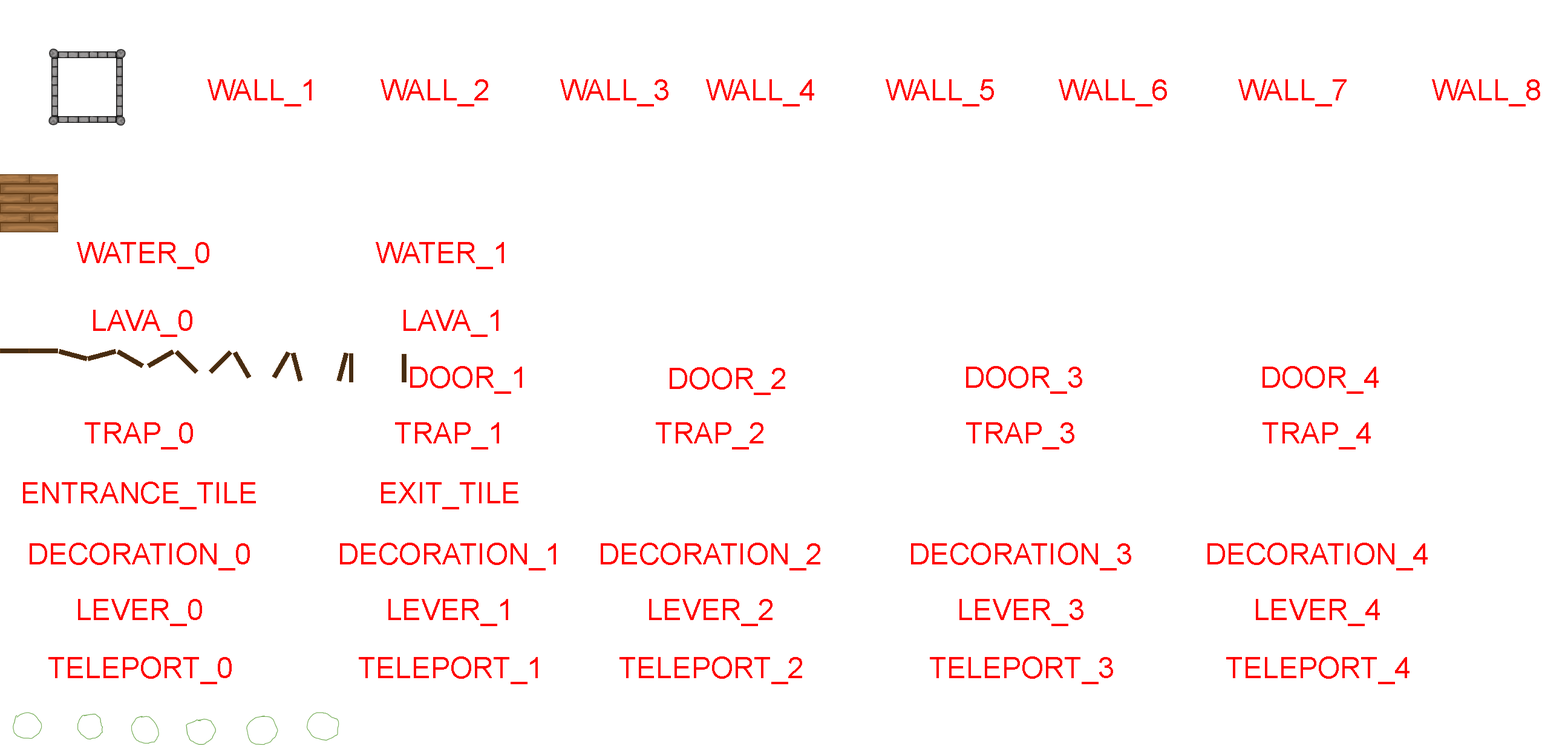
<style>
.page{position:relative;width:1568px;height:755px;background:#ffffff}
.page>*{position:absolute;margin:0}
.t1{font:29px "ArialMT";color:#ff0000}
</style>
<div class="page">
<p class="t1" style="left:207px;top:79px;width:105px;height:27px">WALL_1</p>
<p class="t1" style="left:381px;top:79px;width:107px;height:27px">WALL_2</p>
<p class="t1" style="left:560px;top:79px;width:108px;height:27px">WALL_3</p>
<p class="t1" style="left:706px;top:79px;width:108px;height:27px">WALL_4</p>
<p class="t1" style="left:886px;top:79px;width:108px;height:27px">WALL_5</p>
<p class="t1" style="left:1059px;top:79px;width:108px;height:27px">WALL_6</p>
<p class="t1" style="left:1238px;top:79px;width:109px;height:27px">WALL_7</p>
<p class="t1" style="left:1432px;top:79px;width:108px;height:27px">WALL_8</p>
<p class="t1" style="left:77px;top:242px;width:132px;height:27px">WATER_0</p>
<p class="t1" style="left:376px;top:242px;width:128px;height:27px">WATER_1</p>
<p class="t1" style="left:93px;top:310px;width:99px;height:27px">LAVA_0</p>
<p class="t1" style="left:403px;top:310px;width:95px;height:27px">LAVA_1</p>
<p class="t1" style="left:410px;top:366px;width:112px;height:28px">DOOR_1</p>
<p class="t1" style="left:966px;top:366px;width:116px;height:28px">DOOR_3</p>
<p class="t1" style="left:1263px;top:366px;width:116px;height:28px">DOOR_4</p>
<p class="t1" style="left:670px;top:367px;width:115px;height:28px">DOOR_2</p>
<p class="t1" style="left:85px;top:422px;width:108px;height:27px">TRAP_0</p>
<p class="t1" style="left:395px;top:422px;width:104px;height:27px">TRAP_1</p>
<p class="t1" style="left:656px;top:422px;width:107px;height:27px">TRAP_2</p>
<p class="t1" style="left:966px;top:422px;width:108px;height:27px">TRAP_3</p>
<p class="t1" style="left:1263px;top:422px;width:108px;height:27px">TRAP_4</p>
<p class="t1" style="left:23px;top:482px;width:233px;height:27px">ENTRANCE_TILE</p>
<p class="t1" style="left:381px;top:482px;width:137px;height:27px">EXIT_TILE</p>
<p class="t1" style="left:30px;top:543px;width:220px;height:27px">DECORATION_0</p>
<p class="t1" style="left:340px;top:543px;width:216px;height:27px">DECORATION_1</p>
<p class="t1" style="left:601px;top:543px;width:219px;height:27px">DECORATION_2</p>
<p class="t1" style="left:911px;top:543px;width:220px;height:27px">DECORATION_3</p>
<p class="t1" style="left:1207px;top:543px;width:221px;height:27px">DECORATION_4</p>
<p class="t1" style="left:78px;top:599px;width:124px;height:27px">LEVER_0</p>
<p class="t1" style="left:388px;top:599px;width:120px;height:27px">LEVER_1</p>
<p class="t1" style="left:649px;top:599px;width:124px;height:27px">LEVER_2</p>
<p class="t1" style="left:959px;top:599px;width:124px;height:27px">LEVER_3</p>
<p class="t1" style="left:1256px;top:599px;width:124px;height:27px">LEVER_4</p>
<p class="t1" style="left:48px;top:656px;width:184px;height:28px">TELEPORT_0</p>
<p class="t1" style="left:359px;top:656px;width:179px;height:28px">TELEPORT_1</p>
<p class="t1" style="left:619px;top:656px;width:183px;height:28px">TELEPORT_2</p>
<p class="t1" style="left:930px;top:656px;width:183px;height:28px">TELEPORT_3</p>
<p class="t1" style="left:1226px;top:656px;width:184px;height:28px">TELEPORT_4</p>
</div>
